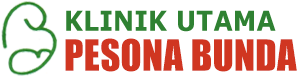
<style>
.page{position:relative;width:301px;height:78px;background:#ffffff}
.page>*{position:absolute;margin:0}
.t1{font:27.4px "Verdana-Bold";letter-spacing:0.01em;color:#2f8132;scale:0.9 1}
.t2{font:40px "Impact";letter-spacing:0.01em;color:#d03621;scale:0.97 1}
</style>
<div class="page">
<p class="t1" style="left:66px;top:10px;width:210px;height:22px">KLINIK UTAMA</p>
<p class="t2" style="left:65px;top:38px;width:232px;height:34px">PESONA BUNDA</p>
</div>
